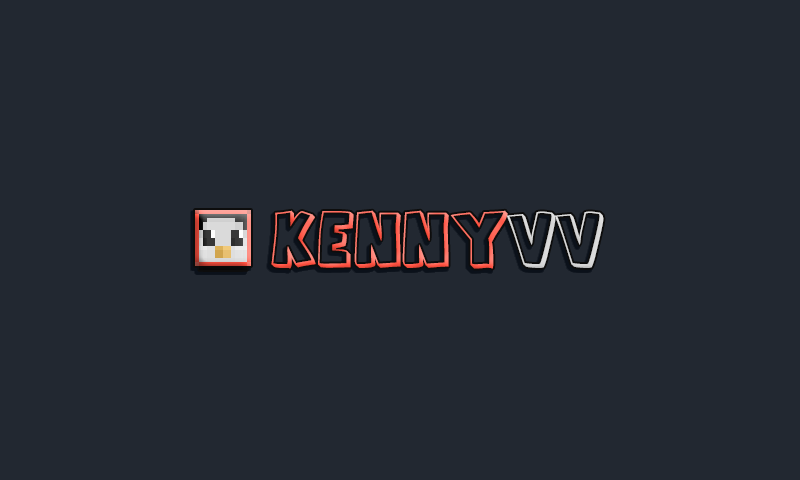
<style>
.page{position:relative;width:800px;height:480px;background:#222831}
.page>*{position:absolute;margin:0}
.t1{font:51.8px "AgentOrange"}
.t2{font:51px "AgentOrange"}
</style>
<div class="page">
<p class="t1" style="left:271px;top:210px;width:333px;height:59px">KENNY<span class="t2">vv</span></p>
</div>
